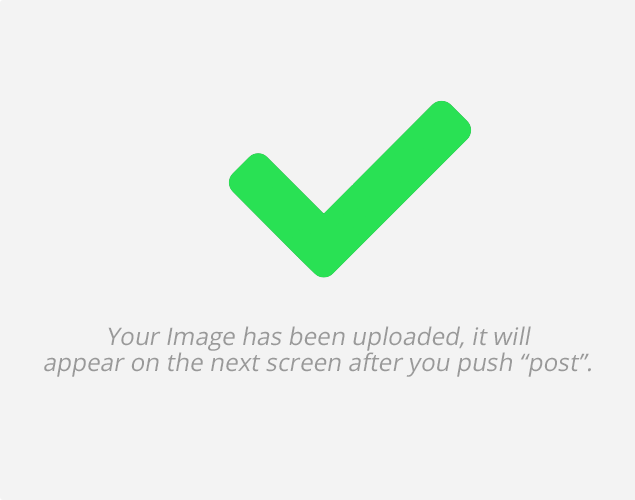
<style>
.page{position:relative;width:635px;height:500px;background:#f3f3f3}
.page>*{position:absolute;margin:0}
.t1{font:24.3px/26.2px "OpenSans";color:#999999;font-style:italic}
</style>
<div class="page">
<p class="t1" style="left:44px;top:326px;width:547px;height:51px;text-align:center">Your Image has been uploaded, it will<br>appear on the next screen after you push “post”.</p>
</div>
